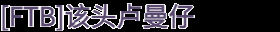
<style>
.page{position:relative;width:280px;height:32px;background:#000000}
.page>*{position:absolute;margin:0}
.t1{font:26px "WebPSD-18463539-0-Regular";color:#59496e;font-weight:bold}
</style>
<div class="page">
<p class="t1" style="left:0px;top:0px;width:280px;height:32px">[FTB]该头卢曼仔</p>
</div>
